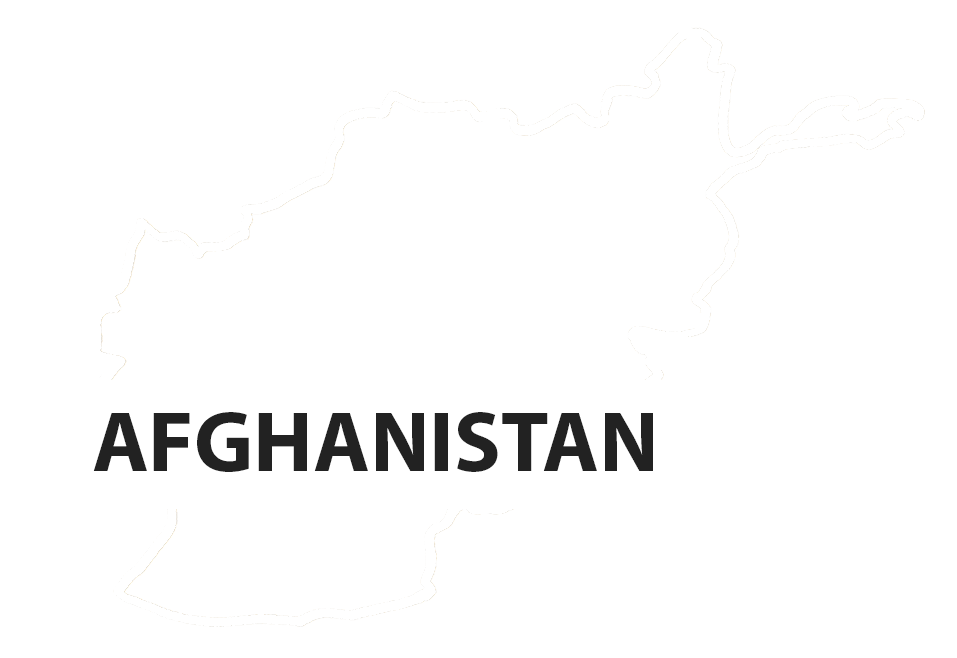
<style>
.page{position:relative;width:957px;height:658px;background:#ffffff}
.page>*{position:absolute;margin:0}
.t1{font:86.6px "MyriadPro-Bold";color:#222222}
</style>
<div class="page">
<p class="t1" style="left:93px;top:412px;width:560px;height:60px">AFGHANISTAN</p>
</div>
